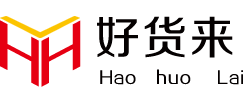
<style>
.page{position:relative;width:250px;height:100px;background:#ffffff}
.page>*{position:absolute;margin:0}
.t1{font:45px "FZZZHUNHJW--GB1-0";letter-spacing:0.058em;color:#050101}
.t2{font:54.5px "FZZZHONGJW--GB1-0";letter-spacing:0.04em;color:#e60012;scale:1.13 1}
.t3{font:16.4px "FZZZHUNHJW--GB1-0";letter-spacing:0.05em;color:#050101}
</style>
<div class="page">
<p class="t1" style="left:97px;top:16px;width:136px;height:42px">好货来</p>
<p class="t2" style="left:0px;top:20px;width:39px;height:67px;rotate:28deg">H</p>
<p class="t2" style="left:41px;top:20px;width:40px;height:67px;rotate:152deg">H</p>
<p class="t3" style="left:100px;top:69px;width:143px;height:16px">Hao   huo    Lai</p>
</div>
